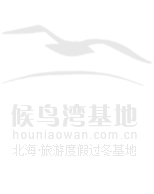
<style>
.page{position:relative;width:154px;height:194px;background:#ffffff}
.page>*{position:absolute;margin:0}
.t1{font:24px "FZCQJW--GB1-0";letter-spacing:0.075em;color:#d4eaf6}
.t2{font:12px "ArialMT";letter-spacing:0.075em;color:#e8e8e8}
.t3{font:12px "SimSun";color:#e4f1f8}
.t4{font:14px "MicrosoftYaHei";color:#e4f1f8}
</style>
<div class="page">
<p class="t1" style="left:11px;top:104px;width:126px;height:23px">候鸟湾基地</p>
<p class="t2" style="left:13px;top:130px;width:124px;height:9px">houniaowan.com.cn</p>
<p class="t3" style="left:13px;top:144px;width:23px;height:12px">北海</p>
<p class="t4" style="left:38px;top:149px;width:3px;height:2px">.</p>
<p class="t3" style="left:41px;top:144px;width:95px;height:12px">旅游度假过冬基地</p>
</div>
